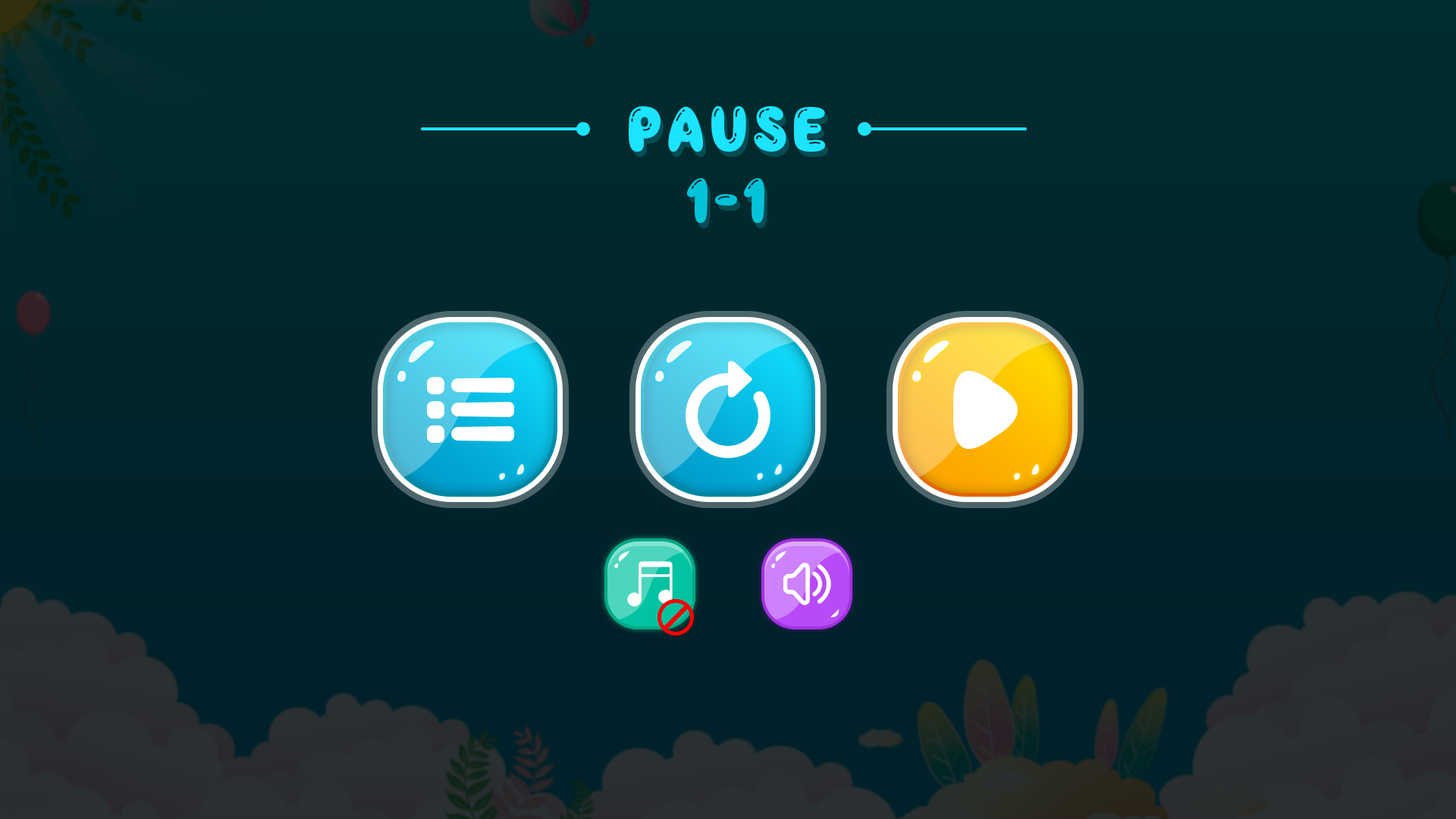
<style>
.page{position:relative;width:1456px;height:819px}
.page>*{position:absolute;margin:0}
.t1{font:60.7px "Balloon";letter-spacing:0.1em;color:#1ce3ff}
.t2{font:60.7px "Balloon";letter-spacing:0.05em;color:#03c3d9}
</style>
<div class="page">
<p class="t1" style="left:629px;top:106px;width:196px;height:46px">PAUSE</p>
<p class="t2" style="left:687px;top:178px;width:77px;height:45px">1-1</p>
</div>
